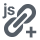
<style>
.page{position:relative;width:40px;height:40px;background:#ffffff}
.page>*{position:absolute;margin:0}
.t1{font:16px "Roboto-Bold";color:#555d66}
.t2{font:21px "Roboto-Bold";color:#555d66;text-transform:uppercase}
</style>
<div class="page">
<p class="t1" style="left:2px;top:3px;width:13px;height:16px">js</p>
<p class="t2" style="left:26px;top:26px;width:11px;height:12px">+</p>
</div>
